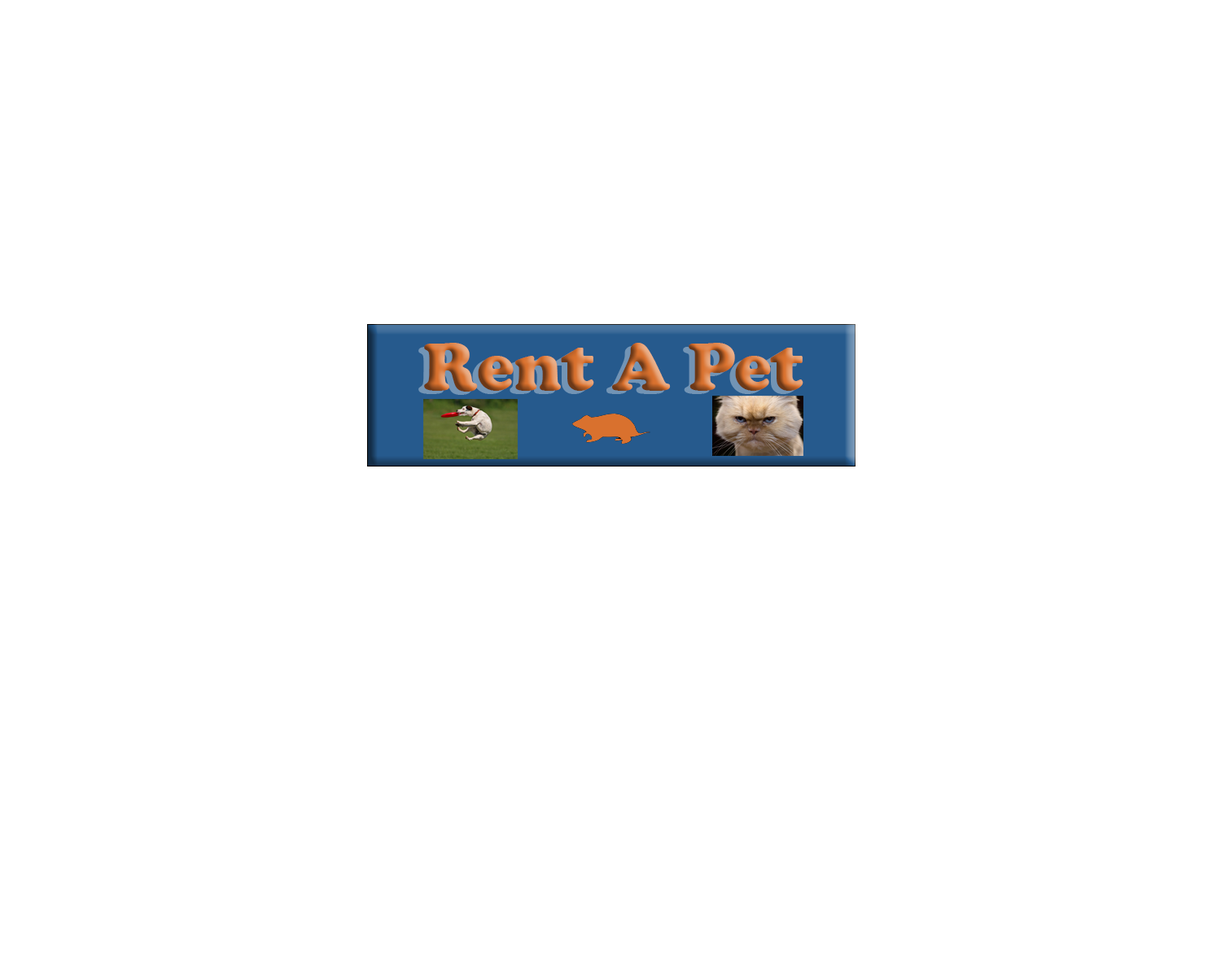
<style>
.page{position:relative;width:1221px;height:977px;background:#ffffff}
.page>*{position:absolute;margin:0}
.t1{font:70.4px "CooperBlack"}
</style>
<div class="page">
<p class="t1" style="left:424px;top:343px;width:379px;height:48px">Rent A Pet</p>
</div>
